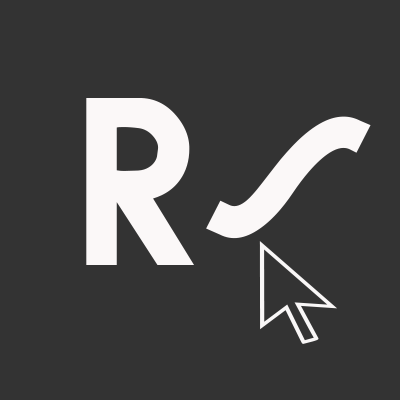
<style>
.page{position:relative;width:400px;height:400px;background:#333333}
.page>*{position:absolute;margin:0}
.t1{font:200px "Brandish";color:#fbf8f8}
</style>
<div class="page">
<p class="t1" style="left:86px;top:98px;width:108px;height:167px">R</p>
<p class="t1" style="left:206px;top:116px;width:165px;height:123px;rotate:27deg">S</p>
</div>
